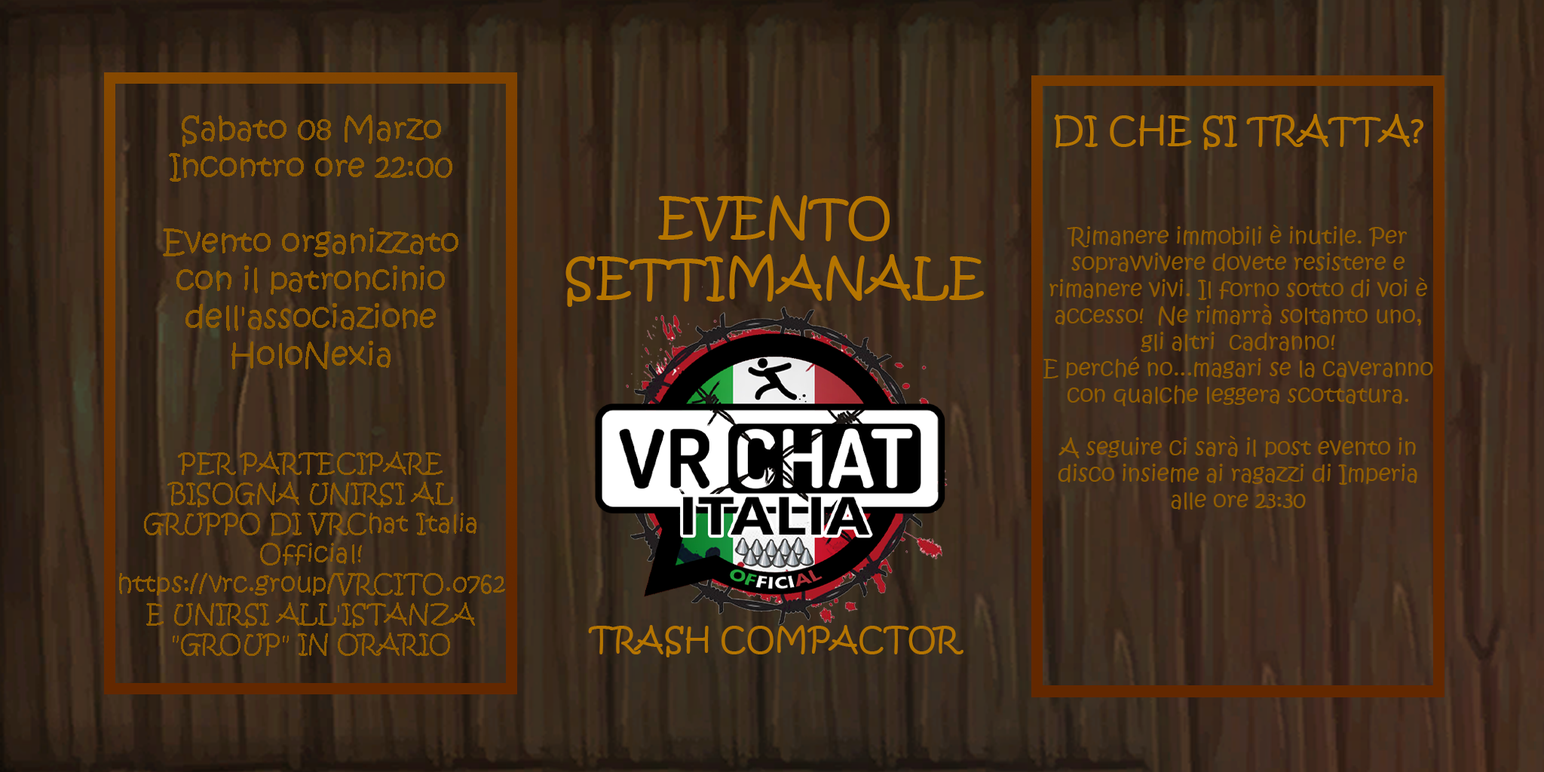
<style>
.page{position:relative;width:1544px;height:772px}
.page>*{position:absolute;margin:0}
.t1{font:22px "KristenITC-Regular";color:#8f5c00}
.t2{font:34.6px "KristenITC-Regular";color:#b57500}
.t3{font:25.1px "KristenITC-Regular";color:#8f5c00}
.t4{font:31.4px "KristenITC-Regular";color:#8f5c00}
.t5{font:50.3px "KristenITC-Regular";color:#b57500}
.t6{font:31.4px "KristenITC-Regular";color:#b57500}
</style>
<div class="page">
<p class="t1" style="left:1044px;top:114px;width:389px;height:396px;text-align:center"><span class="t2">DI CHE SI TRATTA?<br><br><br></span>Rimanere immobili è inutile. Per sopravvivere dovete resistere e rimanere vivi. Il forno sotto di voi è accesso!  Ne rimarrà soltanto uno, gli altri  cadranno!<br>E perché no...magari se la caveranno con qualche leggera scottatura.<br><br>A seguire ci sarà il post evento in disco insieme ai ragazzi di Imperia alle ore 23:30</p>
<p class="t3" style="left:119px;top:115px;width:386px;height:541px;text-align:center"><span class="t4">Sabato 08 Marzo<br>Incontro ore 22:00<br><br>Evento organizzato <br>con il patroncinio dell'associazione HoloNexia<br><br><br></span>PER PARTECIPARE BISOGNA UNIRSI AL GRUPPO DI VRChat Italia Official! https://vrc.group/VRCITO.0762 E UNIRSI ALL'ISTANZA "GROUP" IN ORARIO</p>
<p class="t5" style="left:566px;top:195px;width:418px;height:112px;text-align:center">EVENTO SETTIMANALE</p>
<p class="t6" style="left:588px;top:625px;width:376px;height:33px">TRASH COMPACTOR</p>
</div>
